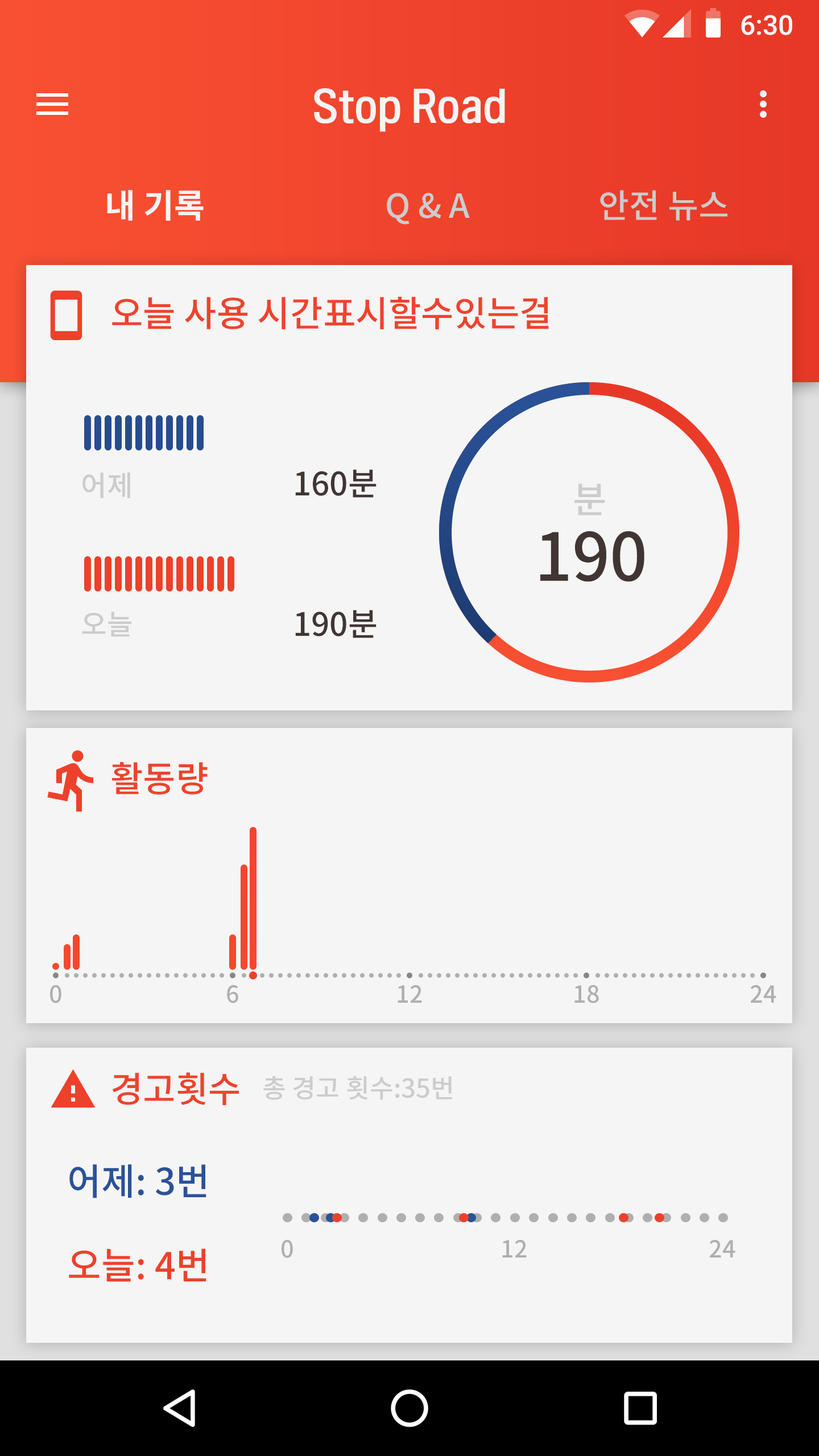
<style>
.page{position:relative;width:819px;height:1456px;background:#f5f5f5}
.page>*{position:absolute;margin:0}
.t1{font:27.3px "Roboto-Medium";color:#ffffff}
.t2{font:36.5px "TTManbalchungchunR";color:#f5f5f5}
.t3{font:33.3px "NotoSansCJKkr-Bold";color:#f5f5f5}
.t4{font:33.3px "NotoSansCJKkr-Medium";color:#cccccc}
.t5{font:35.6px "NotoSansCJKkr-Medium";color:#ef432c}
.t6{font:28.3px "NotoSansCJKkr-Medium";color:#cccccc}
.t7{font:32.3px "NotoSansCJKkr-Medium";color:#413534}
.t8{font:36.7px "NotoSansCJKkr-Medium";color:#cccccc}
.t9{font:66px "NotoSansCJKkr-Medium";color:#403737}
.t10{font:23.6px "NotoSansCJKkr-Medium";color:#b0afaf}
.t11{font:26px "NotoSansCJKkr-Medium";color:#cccccc}
.t12{font:37px "NotoSansCJKkr-Medium";color:#2a5298}
.t13{font:37px "NotoSansCJKkr-Medium";color:#ed412b}
</style>
<div class="page">
<p class="t1" style="left:741px;top:15px;width:51px;height:20px">6:30</p>
<p class="t2" style="left:314px;top:88px;width:191px;height:44px">Stop Road</p>
<p class="t3" style="left:107px;top:190px;width:97px;height:31px">내 기록</p>
<p class="t4" style="left:387px;top:193px;width:83px;height:32px">Q &amp; A</p>
<p class="t4" style="left:600px;top:190px;width:127px;height:31px">안전 뉴스</p>
<p class="t5" style="left:112px;top:296px;width:437px;height:33px">오늘 사용 시간표시할수있는걸</p>
<p class="t6" style="left:82px;top:472px;width:48px;height:26px">어제</p>
<p class="t7" style="left:295px;top:469px;width:82px;height:29px">160분</p>
<p class="t8" style="left:574px;top:483px;width:31px;height:32px">분</p>
<p class="t9" style="left:540px;top:531px;width:104px;height:51px">190</p>
<p class="t6" style="left:82px;top:611px;width:49px;height:26px">오늘</p>
<p class="t7" style="left:295px;top:610px;width:82px;height:28px">190분</p>
<p class="t5" style="left:111px;top:762px;width:97px;height:33px">활동량</p>
<p class="t10" style="left:50px;top:985px;width:11px;height:18px">0</p>
<p class="t10" style="left:227px;top:985px;width:11px;height:18px">6</p>
<p class="t10" style="left:398px;top:985px;width:24px;height:18px">12</p>
<p class="t10" style="left:574px;top:985px;width:25px;height:18px">18</p>
<p class="t10" style="left:750px;top:985px;width:26px;height:18px">24</p>
<p class="t5" style="left:112px;top:1072px;width:127px;height:33px">경고횟수</p>
<p class="t11" style="left:263px;top:1076px;width:189px;height:24px">총 경고 횟수:35번</p>
<p class="t12" style="left:69px;top:1164px;width:137px;height:34px">어제: 3번</p>
<p class="t10" style="left:282px;top:1240px;width:11px;height:18px">0</p>
<p class="t10" style="left:502px;top:1240px;width:25px;height:17px">12</p>
<p class="t10" style="left:709px;top:1240px;width:26px;height:17px">24</p>
<p class="t13" style="left:69px;top:1248px;width:137px;height:34px">오늘: 4번</p>
</div>
